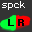
<style>
.page{position:relative;width:32px;height:32px;background:#333333}
.page>*{position:absolute;margin:0}
.t1{font:9px "Monaco";letter-spacing:0.06em;color:#ffffff}
.t2{font:9px "Monaco";letter-spacing:-0.06em;color:#000000;font-weight:bold}
</style>
<div class="page">
<p class="t1" style="left:2px;top:1px;width:23px;height:9px">spck</p>
<p class="t2" style="left:8px;top:19px;width:16px;height:7px">L R</p>
</div>
